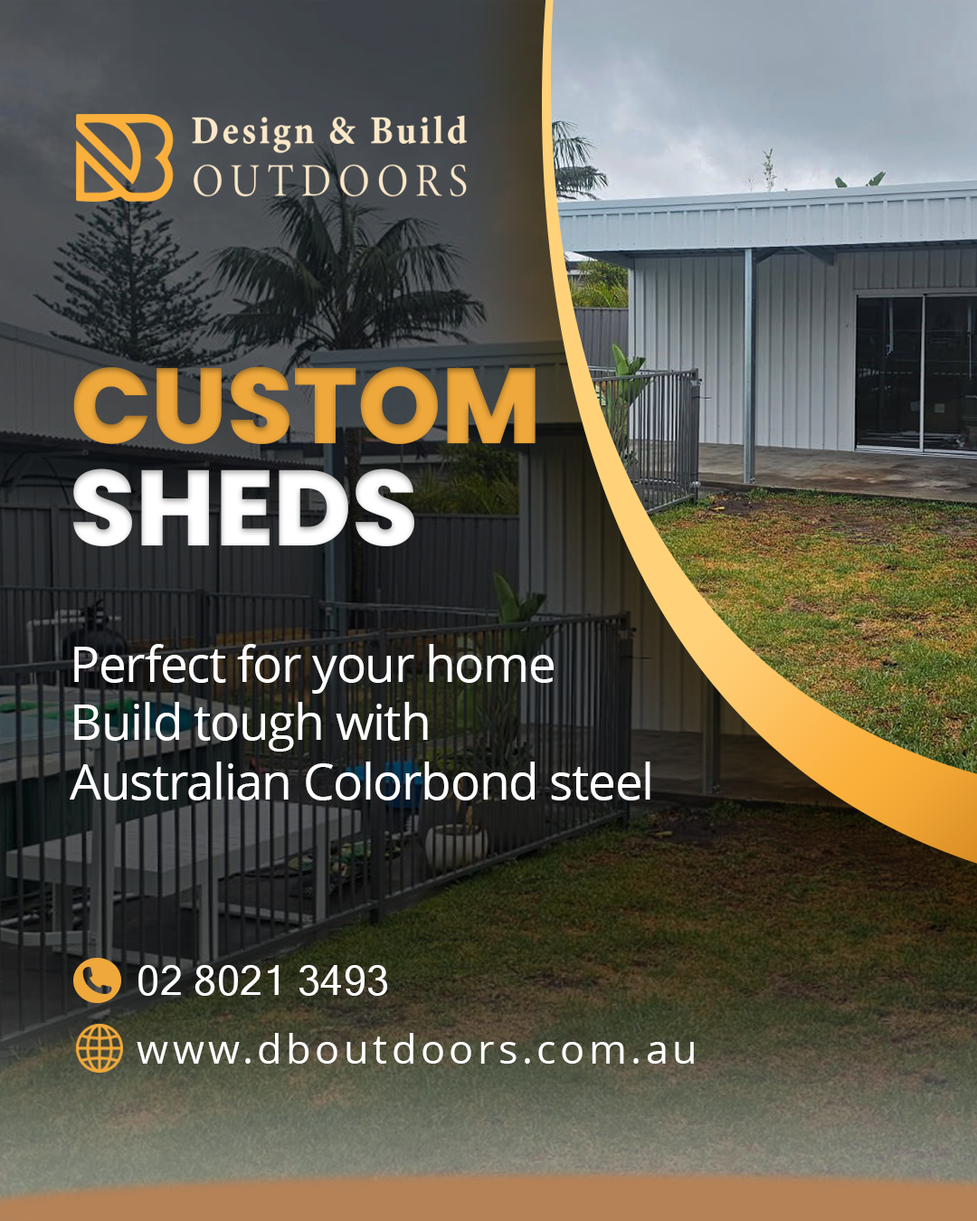
<style>
.page{position:relative;width:977px;height:1221px}
.page>*{position:absolute;margin:0}
.t1{font:106.6px "Poppins-ExtraBold";color:#efa83b}
.t2{font:106.6px "Poppins-ExtraBold";color:#ffffff}
.t3{font:49.7px "OpenSans";letter-spacing:-0.025em;color:#ffffff}
.t4{font:40.7px "MicrosoftSansSerif";letter-spacing:0.01em;color:#ffffff}
.t5{font:40.7px "OpenSans";letter-spacing:0.1em;color:#ffffff}
</style>
<div class="page">
<p class="t1" style="left:73px;top:366px;width:462px;height:78px">CUSTOM</p>
<p class="t2" style="left:73px;top:468px;width:341px;height:78px">SHEDS</p>
<p class="t3" style="left:74px;top:644px;width:479px;height:50px">Perfect for your home</p>
<p class="t3" style="left:70px;top:702px;width:580px;height:98px">Build tough with <br>Australian Colorbond steel</p>
<p class="t4" style="left:138px;top:965px;width:250px;height:31px">02 8021 3493</p>
<p class="t5" style="left:137px;top:1033px;width:557px;height:31px">www.dboutdoors.com.au</p>
</div>
